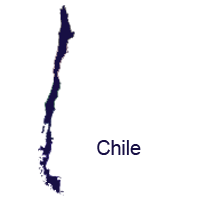
<style>
.page{position:relative;width:200px;height:200px;background:#ffffff}
.page>*{position:absolute;margin:0}
.t1{font:20.8px "ArialMT";color:#170f44;scale:0.94 1}
</style>
<div class="page">
<p class="t1" style="left:97px;top:140px;width:44px;height:15px">Chile</p>
</div>
